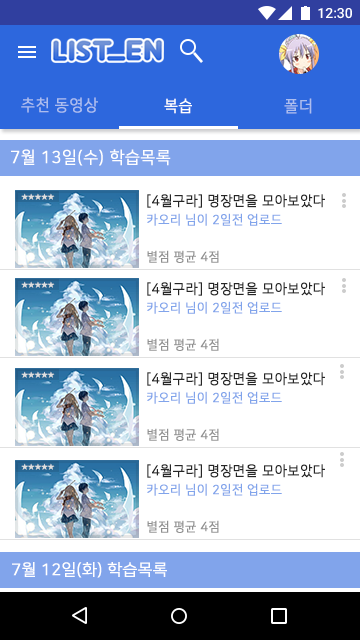
<style>
.page{position:relative;width:360px;height:640px;background:#ffffff}
.page>*{position:absolute;margin:0}
.t1{font:16px "NanumSquareR";letter-spacing:0.02em;color:#acbdee;font-weight:bold;scale:0.96 1}
.t2{font:16px "NanumSquareR";letter-spacing:0.02em;color:#ffffff;font-weight:bold;scale:0.95 1}
.t3{font:16.8px "NanumSquareR";letter-spacing:0.02em;color:#ffffff;font-weight:bold;scale:0.96 1}
.t4{font:6.6px "NanumSquareR";letter-spacing:0.1em;color:#dedede}
.t5{font:13.9px "NanumSquareR";letter-spacing:0.02em;color:#262626;font-weight:bold;scale:0.95 1}
.t6{font:12.9px/120px "NanumSquareR";letter-spacing:0.02em;color:#81a4eb;font-weight:bold;scale:0.95 1}
.t7{font:12.9px/120px "NanumSquareR";letter-spacing:0.02em;color:#909090;font-weight:bold;scale:0.95 1}
.t8{font:16px "NanumSquareR";color:#ffffff;font-weight:bold}
</style>
<div class="page">
<p class="t1" style="left:21px;top:97px;width:77px;height:16px">추천 동영상</p>
<p class="t2" style="left:164px;top:98px;width:28px;height:16px">복습</p>
<p class="t1" style="left:284px;top:98px;width:28px;height:16px">폴더</p>
<p class="t3" style="left:11px;top:149px;width:160px;height:17px">7월 13일(수) 학습목록</p>
<p class="t4" style="left:21px;top:193px;width:34px;height:7px">★★★★★</p>
<p class="t5" style="left:147px;top:194px;width:178px;height:14px">[4월구라] 명장면을 모아보았다</p>
<p class="t6" style="left:147px;top:213px;width:135px;height:13px">카오리 님이 2일전 업로드<br><span class="t7">2</span></p>
<p class="t7" style="left:147px;top:250px;width:72px;height:13px">별점 평균 4점<br>2</p>
<p class="t4" style="left:21px;top:281px;width:34px;height:7px">★★★★★</p>
<p class="t5" style="left:147px;top:282px;width:178px;height:14px">[4월구라] 명장면을 모아보았다</p>
<p class="t6" style="left:147px;top:301px;width:135px;height:13px">카오리 님이 2일전 업로드<br><span class="t7">2</span></p>
<p class="t7" style="left:147px;top:338px;width:72px;height:13px">별점 평균 4점<br>2</p>
<p class="t4" style="left:21px;top:371px;width:34px;height:7px">★★★★★</p>
<p class="t5" style="left:147px;top:372px;width:178px;height:14px">[4월구라] 명장면을 모아보았다</p>
<p class="t6" style="left:147px;top:391px;width:135px;height:13px">카오리 님이 2일전 업로드<br><span class="t7">2</span></p>
<p class="t7" style="left:147px;top:428px;width:72px;height:13px">별점 평균 4점<br>2</p>
<p class="t4" style="left:21px;top:463px;width:34px;height:7px">★★★★★</p>
<p class="t5" style="left:147px;top:464px;width:178px;height:14px">[4월구라] 명장면을 모아보았다</p>
<p class="t6" style="left:147px;top:483px;width:135px;height:13px">카오리 님이 2일전 업로드<br><span class="t7">2</span></p>
<p class="t7" style="left:147px;top:520px;width:72px;height:13px">별점 평균 4점<br>2</p>
<p class="t8" style="left:12px;top:562px;width:155px;height:16px">7월 12일(화) 학습목록</p>
</div>
